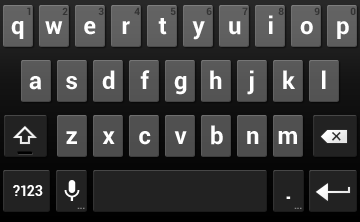
<style>
.page{position:relative;width:360px;height:222px}
.page>*{position:absolute;margin:0}
.t1{font:10px "Roboto-Bold";color:#282828}
.t2{font:24px "Roboto-Bold";color:#ffffff}
.t3{font:14px "Roboto-Bold";color:#ffffff}
.t4{font:10px "Roboto-Bold";letter-spacing:-0.025em;color:#848484}
</style>
<div class="page">
<p class="t1" style="left:27px;top:7px;width:4px;height:8px;opacity:0.8">1</p>
<p class="t1" style="left:62px;top:7px;width:6px;height:8px;opacity:0.8">2</p>
<p class="t1" style="left:98px;top:7px;width:6px;height:8px;opacity:0.8">3</p>
<p class="t1" style="left:134px;top:7px;width:6px;height:8px;opacity:0.8">4</p>
<p class="t1" style="left:170px;top:7px;width:6px;height:8px;opacity:0.8">5</p>
<p class="t1" style="left:206px;top:7px;width:6px;height:8px;opacity:0.8">6</p>
<p class="t1" style="left:242px;top:7px;width:6px;height:8px;opacity:0.8">7</p>
<p class="t2" style="left:269px;top:15px;width:4px;height:19px">i</p>
<p class="t1" style="left:278px;top:7px;width:6px;height:8px;opacity:0.8">8</p>
<p class="t1" style="left:314px;top:7px;width:6px;height:8px;opacity:0.8">9</p>
<p class="t1" style="left:350px;top:7px;width:6px;height:8px;opacity:0.8">0</p>
<p class="t2" style="left:11px;top:21px;width:13px;height:18px">q</p>
<p class="t2" style="left:45px;top:21px;width:18px;height:13px">w</p>
<p class="t2" style="left:84px;top:21px;width:12px;height:14px">e</p>
<p class="t2" style="left:122px;top:21px;width:8px;height:13px">r</p>
<p class="t2" style="left:158px;top:18px;width:9px;height:17px">t</p>
<p class="t2" style="left:192px;top:21px;width:13px;height:19px">y</p>
<p class="t2" style="left:229px;top:21px;width:12px;height:14px">u</p>
<p class="t2" style="left:300px;top:21px;width:13px;height:14px">o</p>
<p class="t2" style="left:337px;top:21px;width:12px;height:18px">p</p>
<p class="t2" style="left:29px;top:76px;width:13px;height:14px">a</p>
<p class="t2" style="left:66px;top:76px;width:11px;height:14px">s</p>
<p class="t2" style="left:102px;top:70px;width:13px;height:19px">d</p>
<p class="t2" style="left:140px;top:70px;width:10px;height:19px">f</p>
<p class="t2" style="left:174px;top:76px;width:13px;height:19px">g</p>
<p class="t2" style="left:210px;top:70px;width:12px;height:19px">h</p>
<p class="t2" style="left:247px;top:70px;width:7px;height:25px">j</p>
<p class="t2" style="left:283px;top:70px;width:12px;height:19px">k</p>
<p class="t2" style="left:322px;top:70px;width:4px;height:19px">l</p>
<p class="t2" style="left:211px;top:125px;width:12px;height:20px">b</p>
<p class="t2" style="left:66px;top:131px;width:11px;height:13px">z</p>
<p class="t2" style="left:102px;top:131px;width:13px;height:13px">x</p>
<p class="t2" style="left:139px;top:131px;width:12px;height:14px">c</p>
<p class="t2" style="left:174px;top:131px;width:13px;height:13px">v</p>
<p class="t2" style="left:247px;top:131px;width:12px;height:13px">n</p>
<p class="t2" style="left:278px;top:131px;width:19px;height:13px">m</p>
<p class="t3" style="left:13px;top:185px;width:30px;height:11px">?123</p>
<p class="t2" style="left:286px;top:196px;width:5px;height:3px">.</p>
<p class="t4" style="left:77px;top:207px;width:8px;height:2px">...</p>
<p class="t4" style="left:294px;top:207px;width:8px;height:2px">...</p>
</div>
